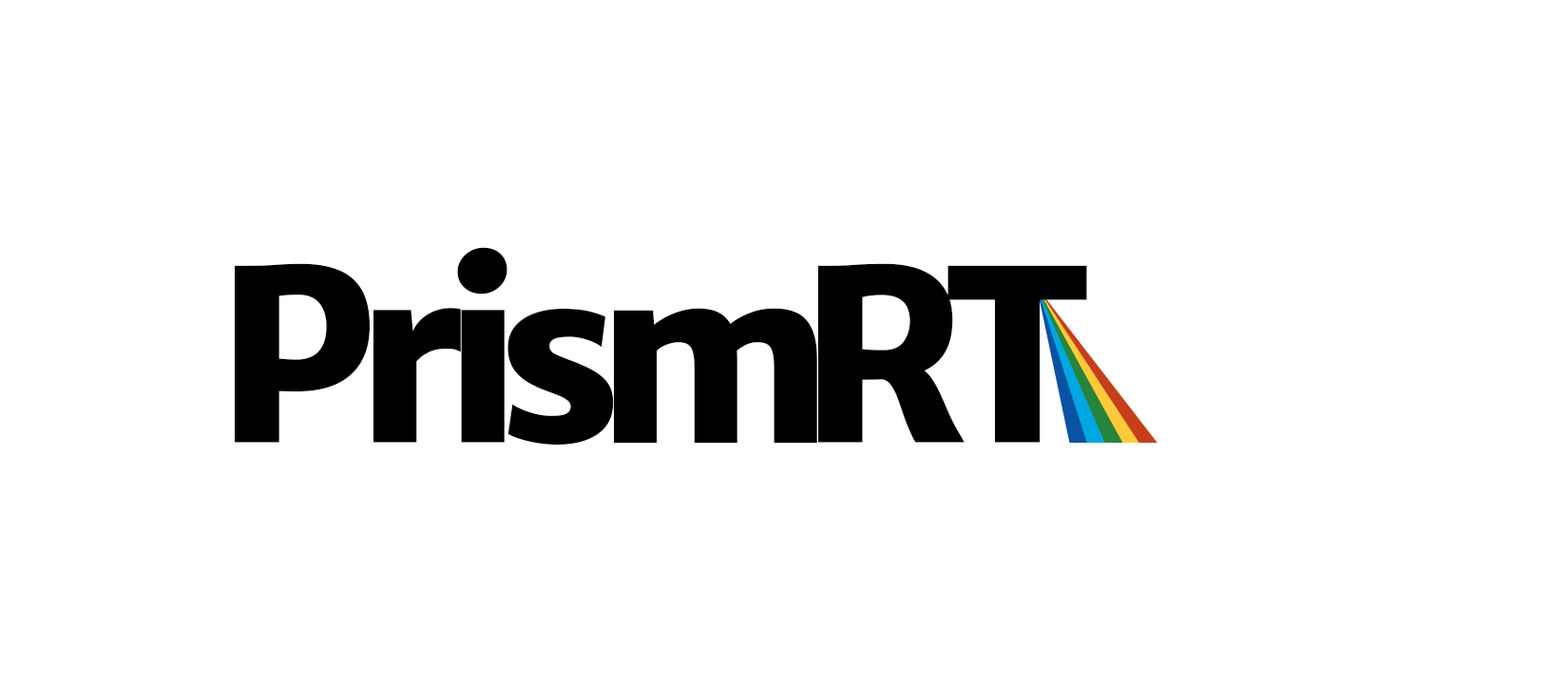
<style>
.page{position:relative;width:1568px;height:684px;background:#ffffff}
.page>*{position:absolute;margin:0}
.t1{font:237.6px "MerriweatherSansRoman-ExtraBold";color:#000000}
</style>
<div class="page">
<p class="t1" style="left:235px;top:247px;width:852px;height:198px">PrismRT</p>
</div>
